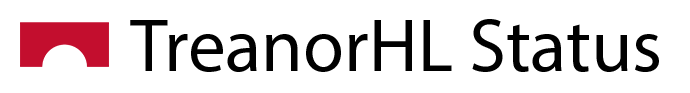
<style>
.page{position:relative;width:690px;height:93px;background:#ffffff}
.page>*{position:absolute;margin:0}
.t1{font:75px "MyriadPro-Regular";color:#000000}
</style>
<div class="page">
<p class="t1" style="left:130px;top:19px;width:529px;height:53px">TreanorHL Status</p>
</div>
